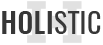
<style>
.page{position:relative;width:103px;height:45px;background:#ffffff}
.page>*{position:absolute;margin:0}
.t1{font:28px "Oswald-Medium";letter-spacing:0.018em;color:#373737;text-transform:uppercase}
.t2{font:28px "Oswald-Regular";letter-spacing:0.018em;color:#373737;text-transform:uppercase}
</style>
<div class="page">
<p class="t1" style="left:2px;top:11px;width:99px;height:23px">Holi<span class="t2">stic</span></p>
</div>
